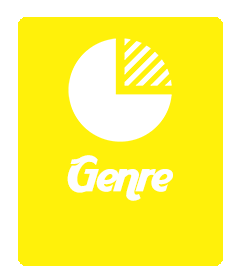
<style>
.page{position:relative;width:240px;height:280px;background:#fff10a}
.page>*{position:absolute;margin:0}
.t1{font:47px "AardvarkCafe";letter-spacing:-0.04em;color:#fdfefe;scale:1.15 1}
</style>
<div class="page">
<p class="t1" style="left:67px;top:155px;width:106px;height:46px">Genre</p>
</div>
